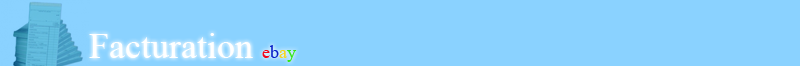
<style>
.page{position:relative;width:800px;height:66px;background:#8ad2ff}
.page>*{position:absolute;margin:0}
.t1{font:36px "IskoolaPota";color:#ffffff}
.t2{font:18px "IskoolaPota";color:#f3051b}
.t3{font:18px "IskoolaPota";color:#0920c8}
.t4{font:18px "IskoolaPota";color:#f6d41a}
.t5{font:18px "IskoolaPota";color:#35e712}
</style>
<div class="page">
<p class="t1" style="left:89px;top:33px;width:208px;height:29px">Facturation <span class="t2">e</span><span class="t3">b</span><span class="t4">a</span><span class="t5">y</span></p>
</div>
